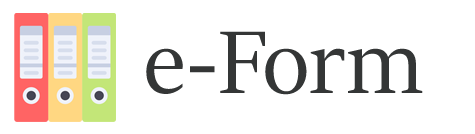
<style>
.page{position:relative;width:475px;height:134px;background:#ffffff}
.page>*{position:absolute;margin:0}
.t1{font:100px "SitkaBanner";color:#343636}
</style>
<div class="page">
<p class="t1" style="left:146px;top:31px;width:277px;height:64px">e-Form</p>
</div>
